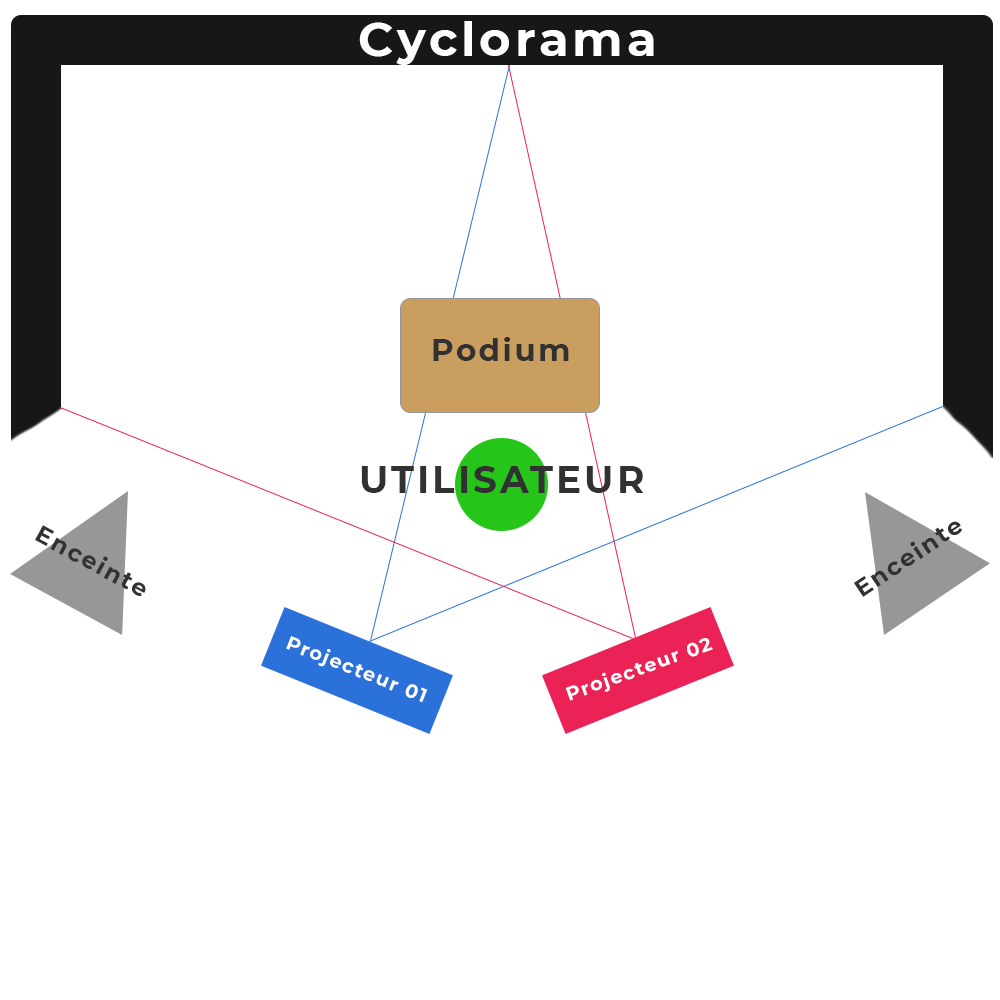
<style>
.page{position:relative;width:1000px;height:1000px;background:#ffffff}
.page>*{position:absolute;margin:0}
.t1{font:48.2px "Montserrat-Bold";letter-spacing:0.08em;color:#fefefe}
.t2{font:30.9px "Montserrat-Bold";letter-spacing:0.08em;color:#313131}
.t3{font:37.3px "Montserrat-Bold";letter-spacing:0.08em;color:#313131}
.t4{font:23.9px "Montserrat-Bold";letter-spacing:0.08em;color:#313131}
.t5{font:19.1px "Montserrat-Bold";letter-spacing:0.08em;color:#ffffff}
</style>
<div class="page">
<p class="t1" style="left:359px;top:21px;width:295px;height:44px">Cyclorama</p>
<p class="t2" style="left:433px;top:337px;width:136px;height:24px">Podium</p>
<p class="t3" style="left:361px;top:466px;width:283px;height:27px">UTILISATEUR</p>
<p class="t4" style="left:853px;top:521px;width:109px;height:76px;rotate:-34deg">Enceinte</p>
<p class="t4" style="left:35px;top:525px;width:111px;height:71px;rotate:28deg">Enceinte</p>
<p class="t5" style="left:286px;top:636px;width:142px;height:67px;rotate:22deg">Projecteur 01</p>
<p class="t5" style="left:565px;top:638px;width:148px;height:63px;rotate:-20deg">Projecteur 02</p>
</div>
